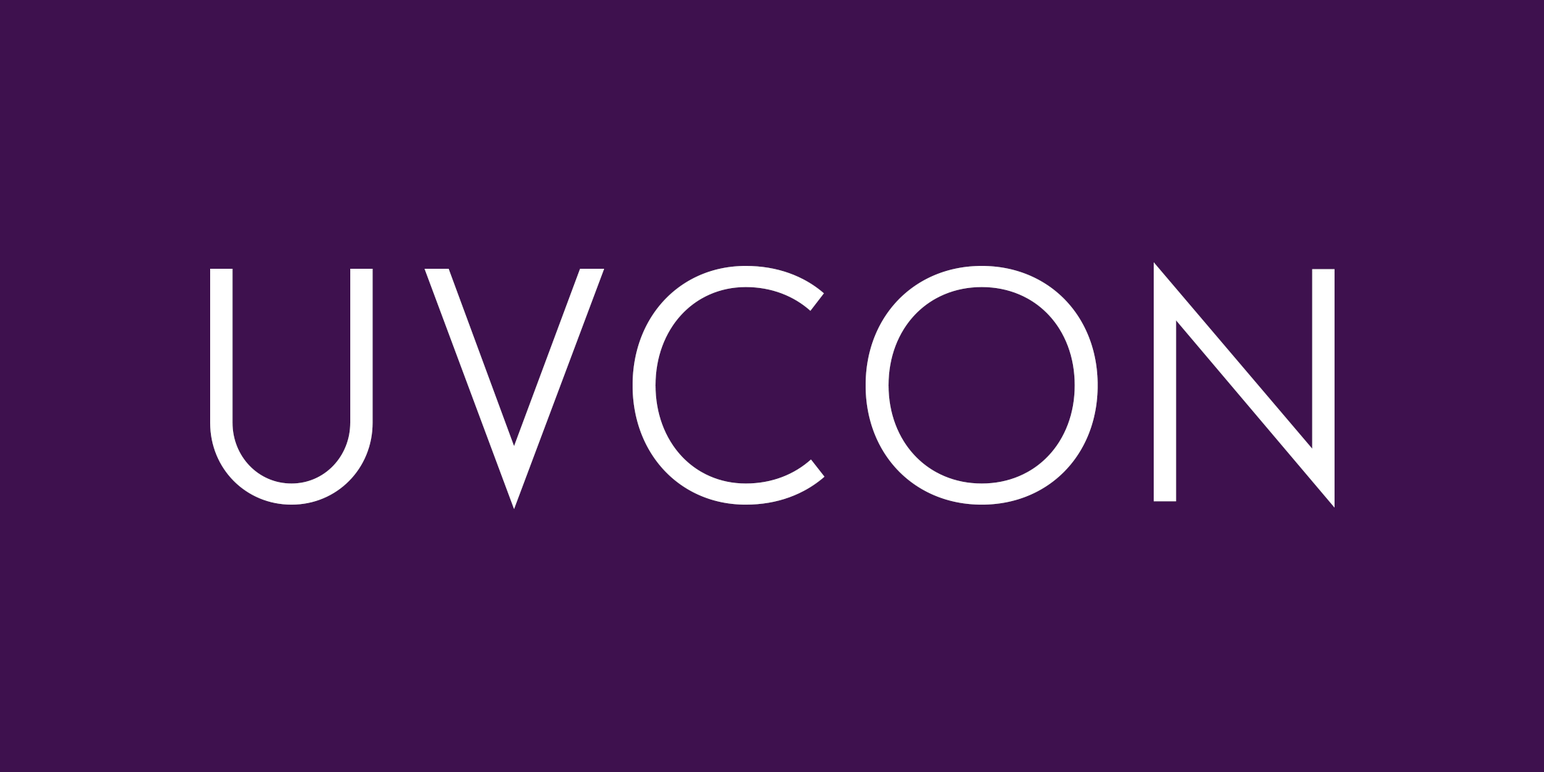
<style>
.page{position:relative;width:1544px;height:772px;background:#3e114e}
.page>*{position:absolute;margin:0}
.t1{font:286px "Edelsans";letter-spacing:0.05em;color:#ffffff}
</style>
<div class="page">
<p class="t1" style="left:210px;top:262px;width:1125px;height:247px">UVCON</p>
</div>
